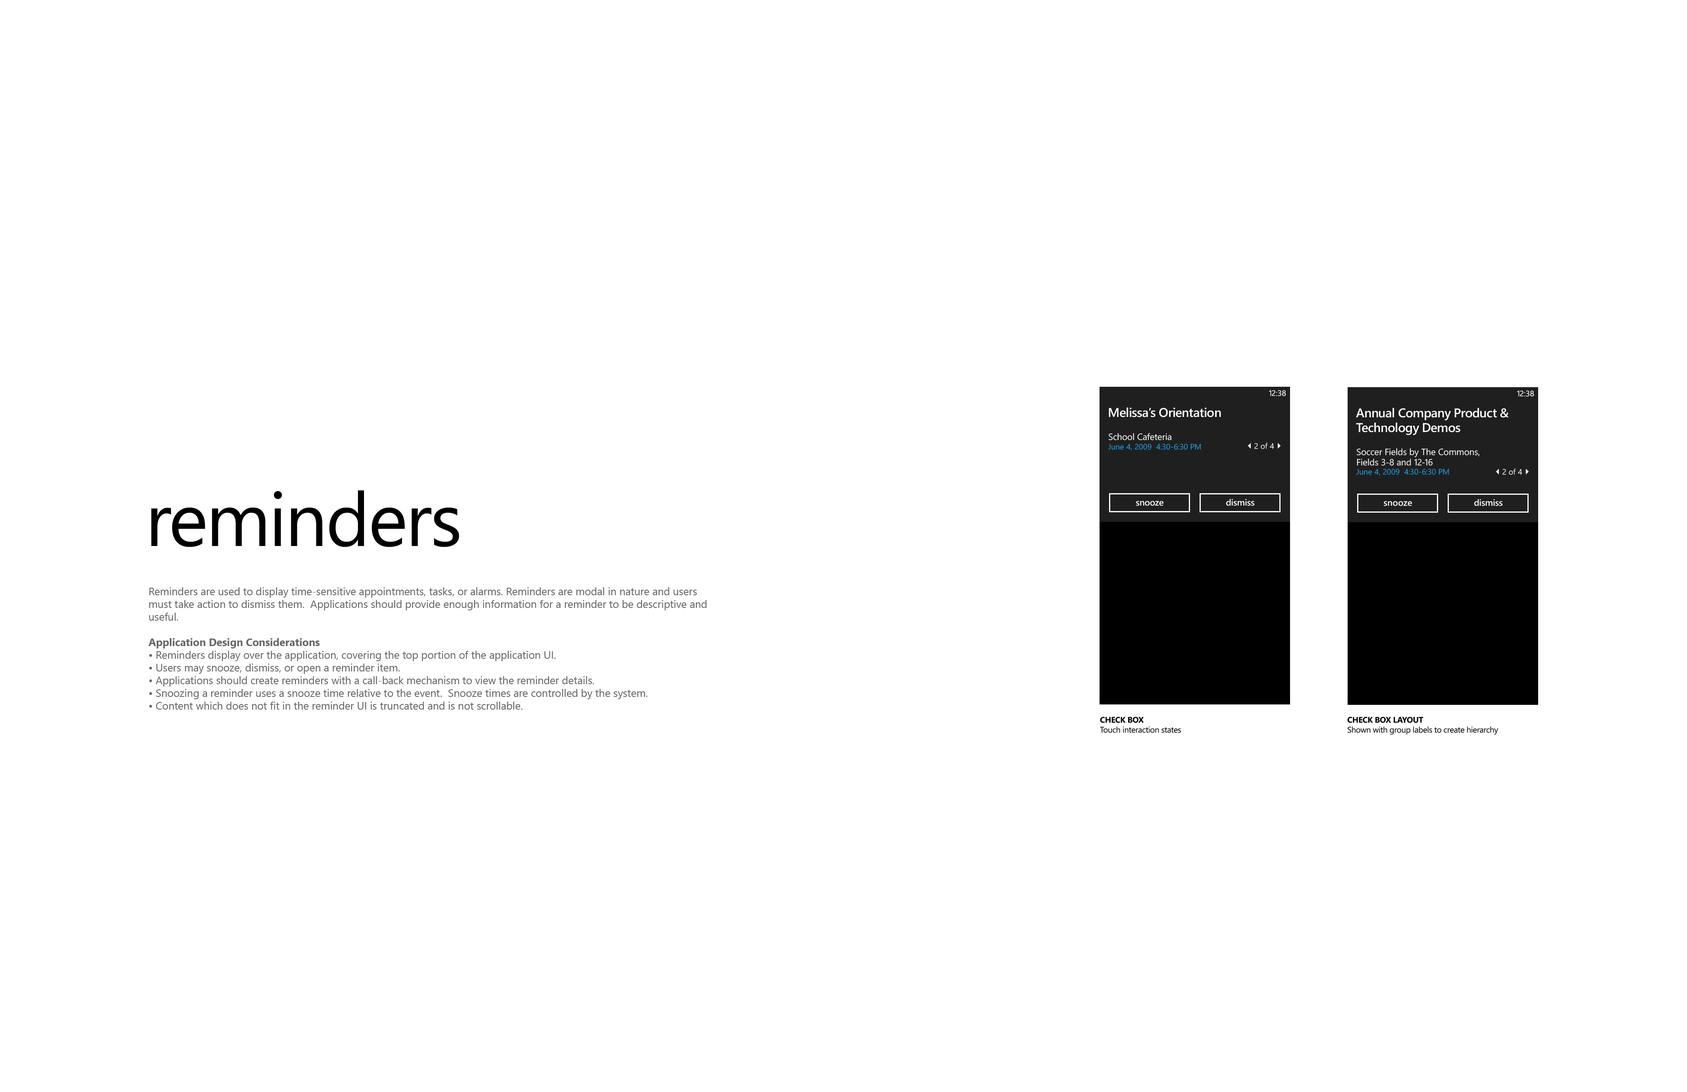
<style>
.page{position:relative;width:1687px;height:1092px;background:#ffffff}
.page>*{position:absolute;margin:0}
.t1{font:7.9px "SegoeWP";color:#ffffff}
.t2{font:7.9px "SegoeWP";letter-spacing:-0.05em;color:#ffffff}
.t3{font:12.7px "SegoeWP-Semibold";letter-spacing:-0.025em;color:#ffffff}
.t4{font:12.7px/14.8px "SegoeWP-Semibold";letter-spacing:-0.025em;color:#ffffff}
.t5{font:7.9px/9.3px "SegoeWP";color:#1ba1e2}
.t6{font:9px/12.2px "SegoeWP";color:#ffffff}
.t7{font:9px/10.1px "SegoeWP";color:#ffffff}
.t8{font:75.2px "SegoeWP";letter-spacing:-0.025em;color:#000000}
.t9{font:9px "SegoeWP-Semibold";letter-spacing:-0.01em;color:#ffffff}
.t10{font:9px "SegoeWP-Semibold";letter-spacing:0.01em;color:#ffffff}
.t11{font:10.6px "SegoeUI";color:#666666}
.t12{font:10.6px "SegoeUI-Bold";color:#666666}
.t13{font:8.3px "SegoeWP";letter-spacing:-0.025em;color:#000000}
.t14{font:8.3px "SegoeWP-Bold";letter-spacing:-0.025em;color:#000000;text-transform:uppercase}
</style>
<div class="page">
<p class="t1" style="left:1269px;top:390px;width:17px;height:6px"><span class="t2">1</span>2:38</p>
<p class="t1" style="left:1518px;top:390px;width:17px;height:7px"><span class="t2">1</span>2:38</p>
<p class="t3" style="left:1109px;top:407px;width:112px;height:10px">Melissa’s Orientation</p>
<p class="t4" style="left:1356px;top:408px;width:153px;height:27px">Annual Company Product &amp;<br>Technology Demos</p>
<p class="t5" style="left:1109px;top:433px;width:92px;height:18px"><span class="t6">School Cafeteria<br></span>June 4, 2009  4:30-6:30 PM</p>
<p class="t1" style="left:1255px;top:443px;width:20px;height:6px">2 of 4</p>
<p class="t6" style="left:1357px;top:448px;width:123px;height:28px">Soccer Fields by The Commons,<br><span class="t7">Fields 3-8 and 12-16<br></span><span class="t5">June 4, 2009  4:30-6:30 PM</span></p>
<p class="t1" style="left:1503px;top:469px;width:20px;height:6px">2 of 4</p>
<p class="t8" style="left:151px;top:490px;width:308px;height:57px">reminders</p>
<p class="t9" style="left:1136px;top:501px;width:28px;height:5px">snooze</p>
<p class="t9" style="left:1227px;top:499px;width:28px;height:7px">dismiss</p>
<p class="t10" style="left:1384px;top:501px;width:28px;height:5px">snooze</p>
<p class="t9" style="left:1475px;top:499px;width:28px;height:7px">dismiss</p>
<p class="t11" style="left:148px;top:587px;width:559px;height:123px">Reminders are used to display time-sensitive appointments, tasks, or alarms. Reminders are modal in nature and users must take action to dismiss them.  Applications should provide enough information for a reminder to be descriptive and useful.<br><br><span class="t12">Application Design Considerations <br></span>• Reminders display over the application, covering the top portion of the application UI.<br>• Users may snooze, dismiss, or open a reminder item.<br>• Applications should create reminders with a call-back mechanism to view the reminder details.<br>• Snoozing a reminder uses a snooze time relative to the event.  Snooze times are controlled by the system.<br>• Content which does not fit in the reminder UI is truncated and is not scrollable.</p>
<p class="t13" style="left:1100px;top:717px;width:81px;height:16px"><span class="t14">check box<br></span>Touch interaction states</p>
<p class="t13" style="left:1348px;top:717px;width:151px;height:18px"><span class="t14">check box layout<br></span>Shown with group labels to create hierarchy</p>
</div>
